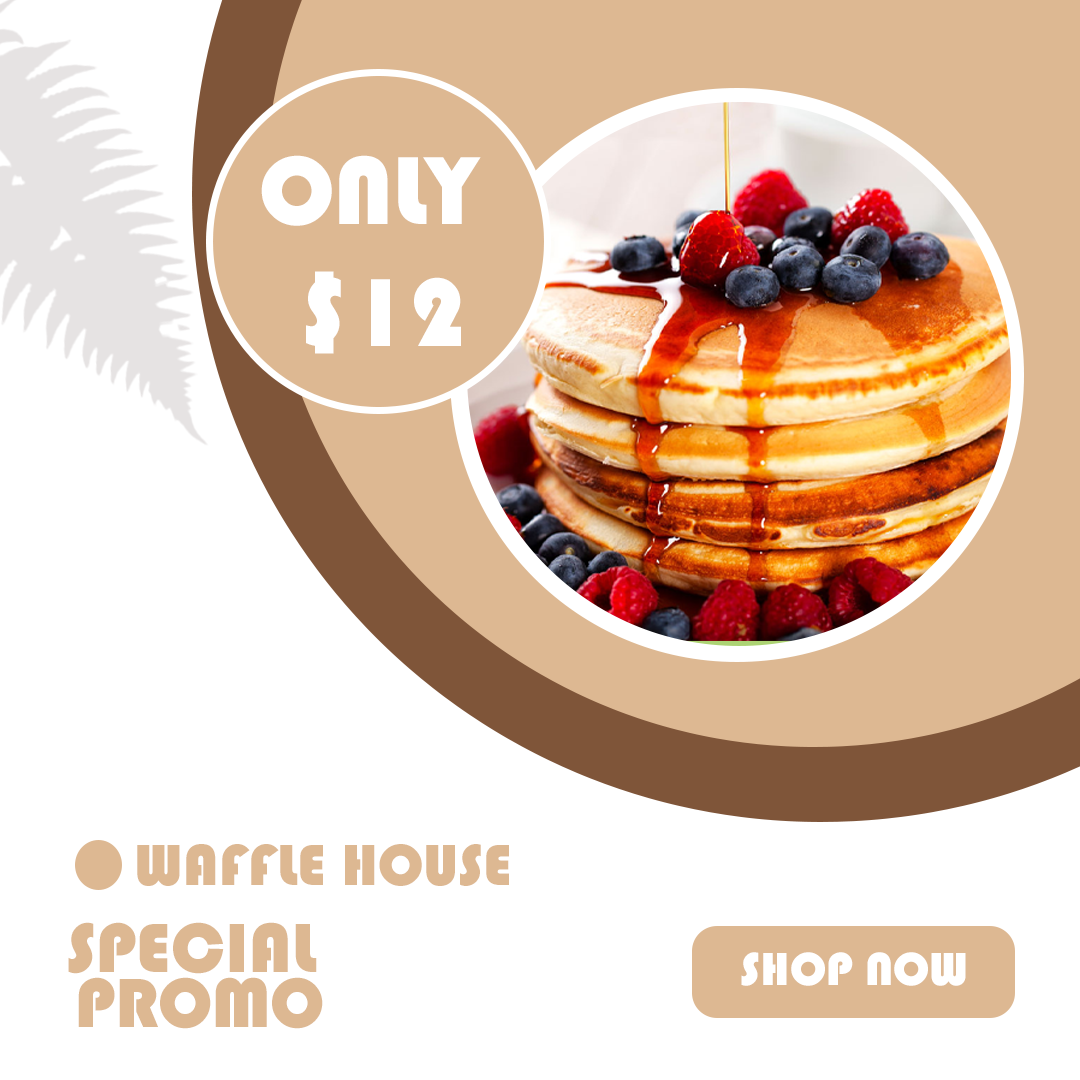
<style>
.page{position:relative;width:1080px;height:1080px;background:#ffffff}
.page>*{position:absolute;margin:0}
.t1{font:100px/122px "Bauhaus93";color:#ffffff}
.t2{font:60px "Bauhaus93";color:#ddb892}
.t3{font:72px/55px "Bauhaus93";color:#ddb892}
.t4{font:48px "Bauhaus93";color:#ffffff}
</style>
<div class="page">
<p class="t1" style="left:261px;top:155px;width:220px;height:199px;text-align:center">ONLY <br>$12</p>
<p class="t2" style="left:137px;top:844px;width:372px;height:42px">WAFFLE HOUSE</p>
<p class="t3" style="left:68px;top:922px;width:255px;height:107px;text-align:center">SPECIAL <br>PROMO</p>
<p class="t4" style="left:741px;top:952px;width:225px;height:34px">SHOP NOW</p>
</div>
